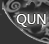
<style>
.page{position:relative;width:49px;height:44px;background:#333333}
.page>*{position:absolute;margin:0}
.t1{font:14px "LaoUI";color:#ffffff}
</style>
<div class="page">
<p class="t1" style="left:16px;top:14px;width:30px;height:13px">QUN</p>
</div>
